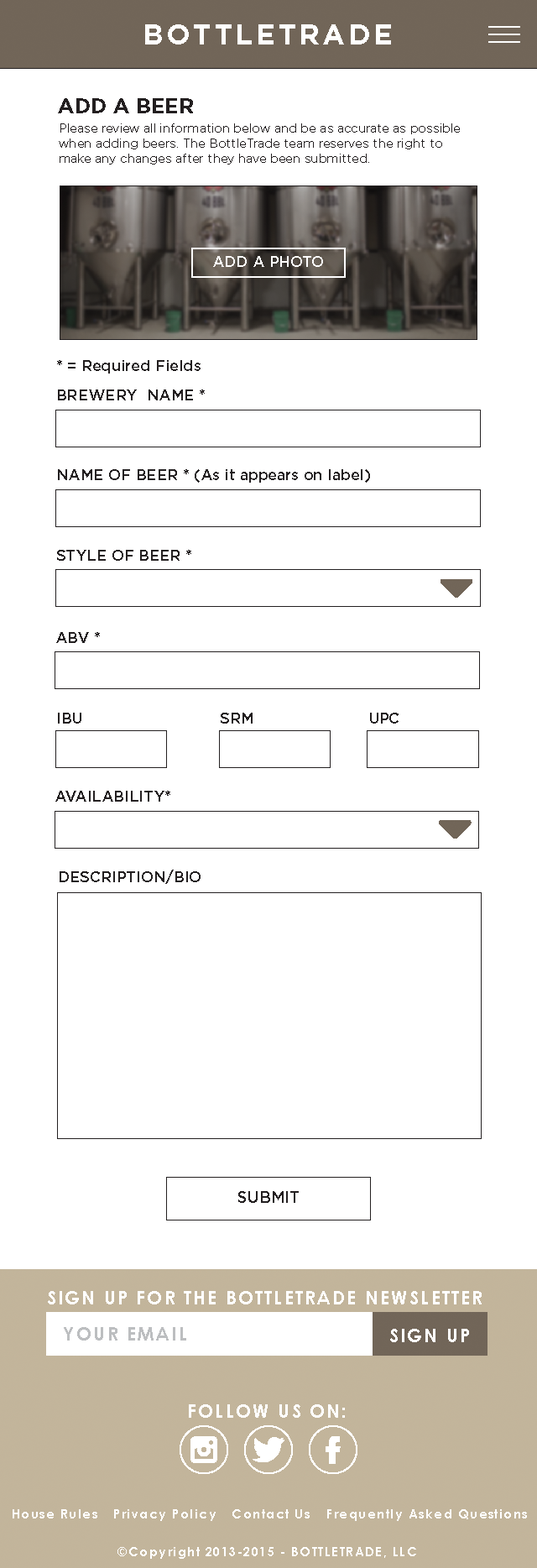
<style>
.page{position:relative;width:537px;height:1568px;background:#ffffff}
.page>*{position:absolute;margin:0}
.t1{font:28.5px "Gotham-Bold";letter-spacing:0.099em;color:#ffffff}
.t2{font:21px "Gotham-Bold";color:#231f20}
.t3{font:12.6px "Gotham-Book";color:#231f20}
.t4{font:15.1px "Gotham-Medium";color:#ffffff}
.t5{font:15.3px "Gotham-Medium";color:#231f20}
.t6{font:15.9px "Gotham-Medium";color:#231f20}
.t7{font:18.5px "CenturyGothic-Bold";letter-spacing:0.099em;color:#ffffff}
.t8{font:18.5px "CenturyGothic-Bold";letter-spacing:0.099em;color:#bcbec0}
.t9{font:12.6px "CenturyGothic-Bold";letter-spacing:0.099em;color:#ffffff}
</style>
<div class="page">
<p class="t1" style="left:145px;top:24px;width:246px;height:20px">BOTTLETRADE</p>
<p class="t2" style="left:58px;top:98px;width:135px;height:15px">ADD A BEER</p>
<p class="t3" style="left:59px;top:123px;width:401px;height:42px">Please review all information below and be as accurate as possible when adding beers. The BottleTrade team reserves the right to make any changes after they have been submitted.</p>
<p class="t4" style="left:213px;top:256px;width:110px;height:11px">ADD A PHOTO</p>
<p class="t5" style="left:57px;top:360px;width:144px;height:14px">* = Required Fields</p>
<p class="t5" style="left:58px;top:389px;width:147px;height:11px">BREWERY  NAME *</p>
<p class="t5" style="left:58px;top:469px;width:312px;height:14px">NAME OF BEER * (As it appears on label)</p>
<p class="t5" style="left:57px;top:550px;width:134px;height:11px">STYLE OF BEER *</p>
<p class="t5" style="left:56px;top:632px;width:44px;height:11px">ABV *</p>
<p class="t5" style="left:58px;top:713px;width:23px;height:11px">IBU</p>
<p class="t5" style="left:221px;top:713px;width:32px;height:11px">SRM</p>
<p class="t5" style="left:370px;top:713px;width:29px;height:11px">UPC</p>
<p class="t5" style="left:55px;top:791px;width:115px;height:11px">AVAILABILITY*</p>
<p class="t5" style="left:60px;top:870px;width:141px;height:14px">DESCRIPTION/BIO</p>
<p class="t6" style="left:238px;top:1191px;width:61px;height:12px">SUBMIT</p>
<p class="t7" style="left:48px;top:1291px;width:434px;height:13px">SIGN UP FOR THE BOTTLETRADE NEWSLETTER</p>
<p class="t8" style="left:64px;top:1327px;width:122px;height:14px">YOUR EMAIL</p>
<p class="t7" style="left:390px;top:1329px;width:79px;height:13px">SIGN UP</p>
<p class="t7" style="left:189px;top:1404px;width:156px;height:14px">FOLLOW US ON:</p>
<p class="t9" style="left:13px;top:1509px;width:84px;height:9px">House Rules</p>
<p class="t9" style="left:114px;top:1509px;width:102px;height:12px">Privacy Policy</p>
<p class="t9" style="left:233px;top:1509px;width:77px;height:9px">Contact Us</p>
<p class="t9" style="left:327px;top:1509px;width:200px;height:12px">Frequently Asked Questions</p>
<p class="t9" style="left:118px;top:1547px;width:298px;height:12px">©Copyright 2013-2015 - BOTTLETRADE, LLC</p>
</div>
